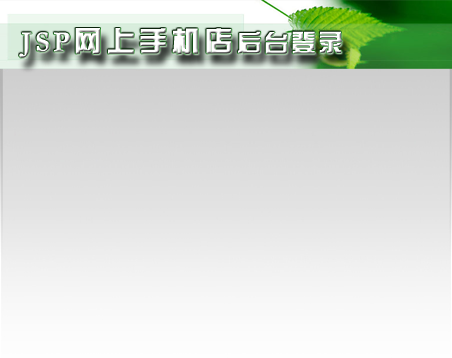
<style>
.page{position:relative;width:452px;height:358px}
.page>*{position:absolute;margin:0}
.t1{font:28px "BDZYJT--GB1-0";letter-spacing:0.14em;color:#ffffff;font-weight:bold}
.t2{font:28px "Garamond-Bold";letter-spacing:0.1em;color:#ffffff;font-weight:bold}
.t3{font:24px "BDZYJT--GB1-0";letter-spacing:0.1em;color:#ffffff;font-weight:bold}
</style>
<div class="page">
<p class="t1" style="left:19px;top:28px;width:323px;height:30px"><span class="t2">JSP</span>网上手机店<span class="t3">后台登录</span></p>
</div>
